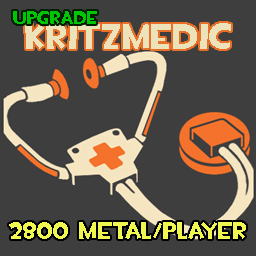
<style>
.page{position:relative;width:256px;height:256px;background:#3e3e3e}
.page>*{position:absolute;margin:0}
.t1{font:18px "TF2Build";color:#00c505}
.t2{font:36px "TF2Build";color:#ede3bb}
.t3{font:24px "TF2Build";color:#f0f850}
</style>
<div class="page">
<p class="t1" style="left:13px;top:11px;width:84px;height:13px">UPGRADE</p>
<p class="t2" style="left:25px;top:23px;width:206px;height:26px">KRITZMEDIC</p>
<p class="t3" style="left:9px;top:222px;width:237px;height:17px">2800 metal/player</p>
</div>
